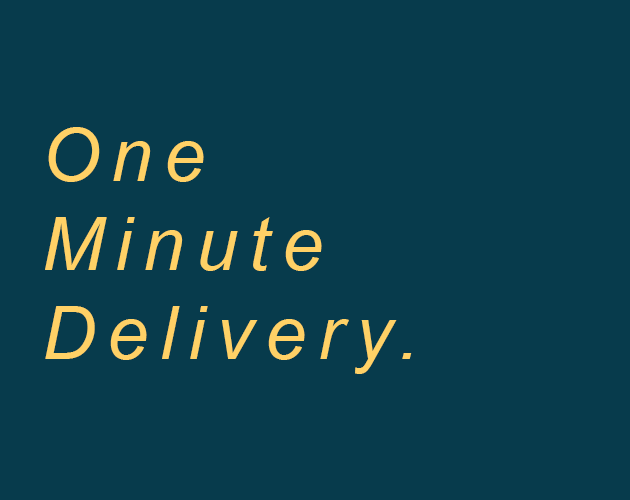
<style>
.page{position:relative;width:630px;height:500px;background:#073b4c}
.page>*{position:absolute;margin:0}
.t1{font:74px "Arial-ItalicMT";letter-spacing:0.16em;color:#ffd166}
</style>
<div class="page">
<p class="t1" style="left:45px;top:127px;width:367px;height:247px">One<br>Minute<br>Delivery.</p>
</div>
